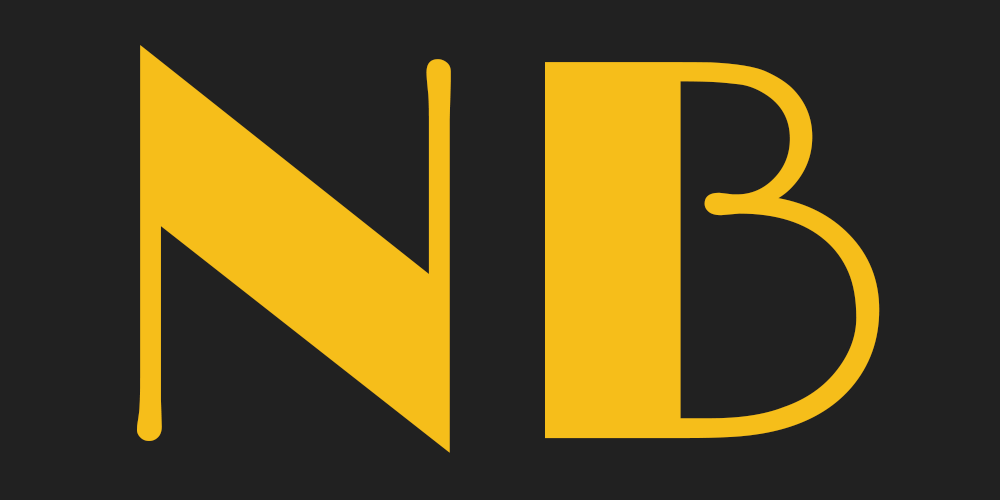
<style>
.page{position:relative;width:1000px;height:500px;background:#212121}
.page>*{position:absolute;margin:0}
.t1{font:544px "Limelight-Regular";color:#f6be1a}
</style>
<div class="page">
<p class="t1" style="left:137px;top:45px;width:743px;height:408px">NB</p>
</div>
